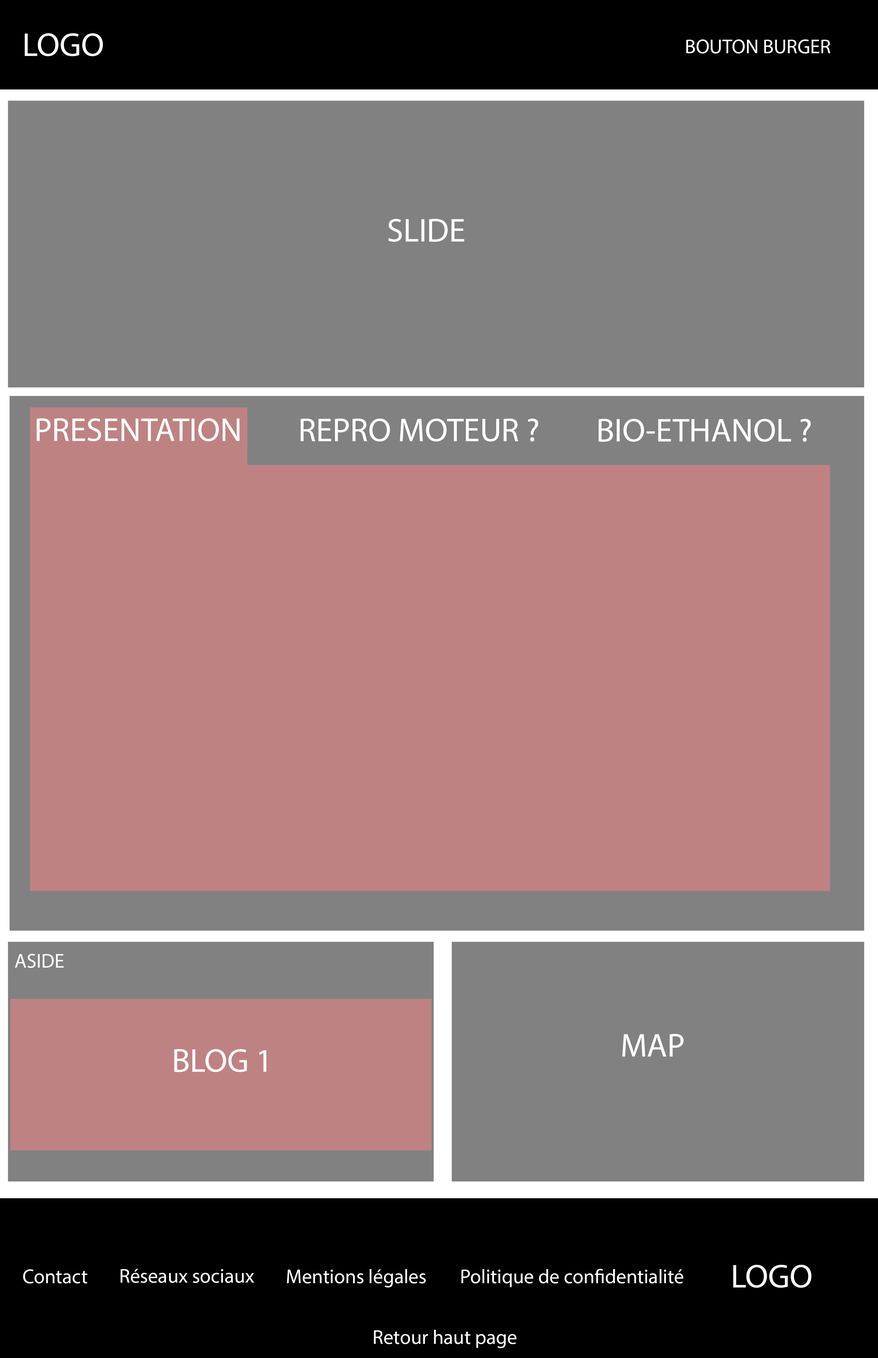
<style>
.page{position:relative;width:878px;height:1358px;background:#818181}
.page>*{position:absolute;margin:0}
.t1{font:33.3px "MyriadPro-Regular";color:#ffffff}
.t2{font:20px "MyriadPro-Regular";color:#ffffff}
</style>
<div class="page">
<p class="t1" style="left:25px;top:33px;width:78px;height:23px">LOGO</p>
<p class="t2" style="left:686px;top:39px;width:145px;height:15px">BOUTON BURGER</p>
<p class="t1" style="left:388px;top:219px;width:76px;height:23px">SLIDE</p>
<p class="t1" style="left:37px;top:418px;width:203px;height:23px">PRESENTATION</p>
<p class="t1" style="left:301px;top:418px;width:237px;height:24px">REPRO MOTEUR ?</p>
<p class="t1" style="left:599px;top:418px;width:212px;height:24px">BIO-ETHANOL ?</p>
<p class="t2" style="left:15px;top:953px;width:49px;height:15px">ASIDE</p>
<p class="t1" style="left:623px;top:1033px;width:61px;height:23px">MAP</p>
<p class="t1" style="left:174px;top:1048px;width:92px;height:24px">BLOG 1</p>
<p class="t1" style="left:734px;top:1264px;width:78px;height:24px">LOGO</p>
<p class="t2" style="left:23px;top:1269px;width:64px;height:14px">Contact</p>
<p class="t2" style="left:121px;top:1268px;width:133px;height:14px">Réseaux sociaux</p>
<p class="t2" style="left:287px;top:1269px;width:139px;height:18px">Mentions légales</p>
<p class="t2" style="left:462px;top:1268px;width:222px;height:19px">Politique de confidentialité</p>
<p class="t2" style="left:374px;top:1329px;width:143px;height:19px">Retour haut page</p>
</div>
